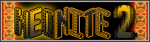
<style>
.page{position:relative;width:150px;height:42px}
.page>*{position:absolute;margin:0}
.t1{font:41.1px "Erthqake";scale:0.87 1}
.t2{font:31.3px "Blox-(BRK";scale:0.87 1}
.t3{font:31.3px "Blox-(BRK";color:#191919;scale:0.87 1}
</style>
<div class="page">
<p class="t1" style="left:113px;top:4px;width:24px;height:34px">2</p>
<p class="t2" style="left:15px;top:7px;width:41px;height:31px">NeO</p>
<p class="t3" style="left:55px;top:7px;width:55px;height:31px">nItE</p>
</div>
